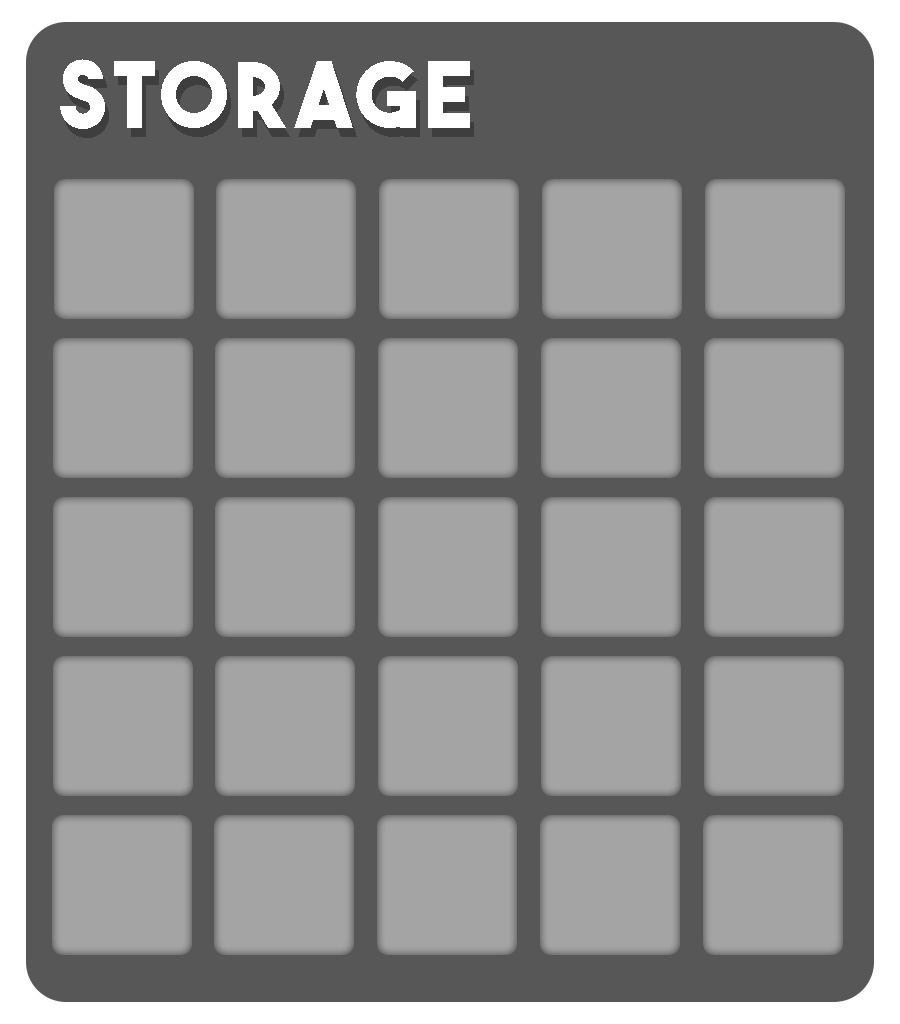
<style>
.page{position:relative;width:900px;height:1024px;background:#a4a4a4}
.page>*{position:absolute;margin:0}
.t1{font:91.3px "TheBoldFont";letter-spacing:0.05em;color:#ffffff}
</style>
<div class="page">
<p class="t1" style="left:60px;top:59px;width:410px;height:70px">Storage</p>
</div>
